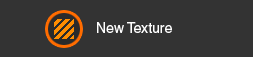
<style>
.page{position:relative;width:253px;height:57px;background:#333333}
.page>*{position:absolute;margin:0}
.t1{font:14px "Helvetica";color:#ffffff}
</style>
<div class="page">
<p class="t1" style="left:97px;top:22px;width:75px;height:11px">New Texture</p>
</div>
